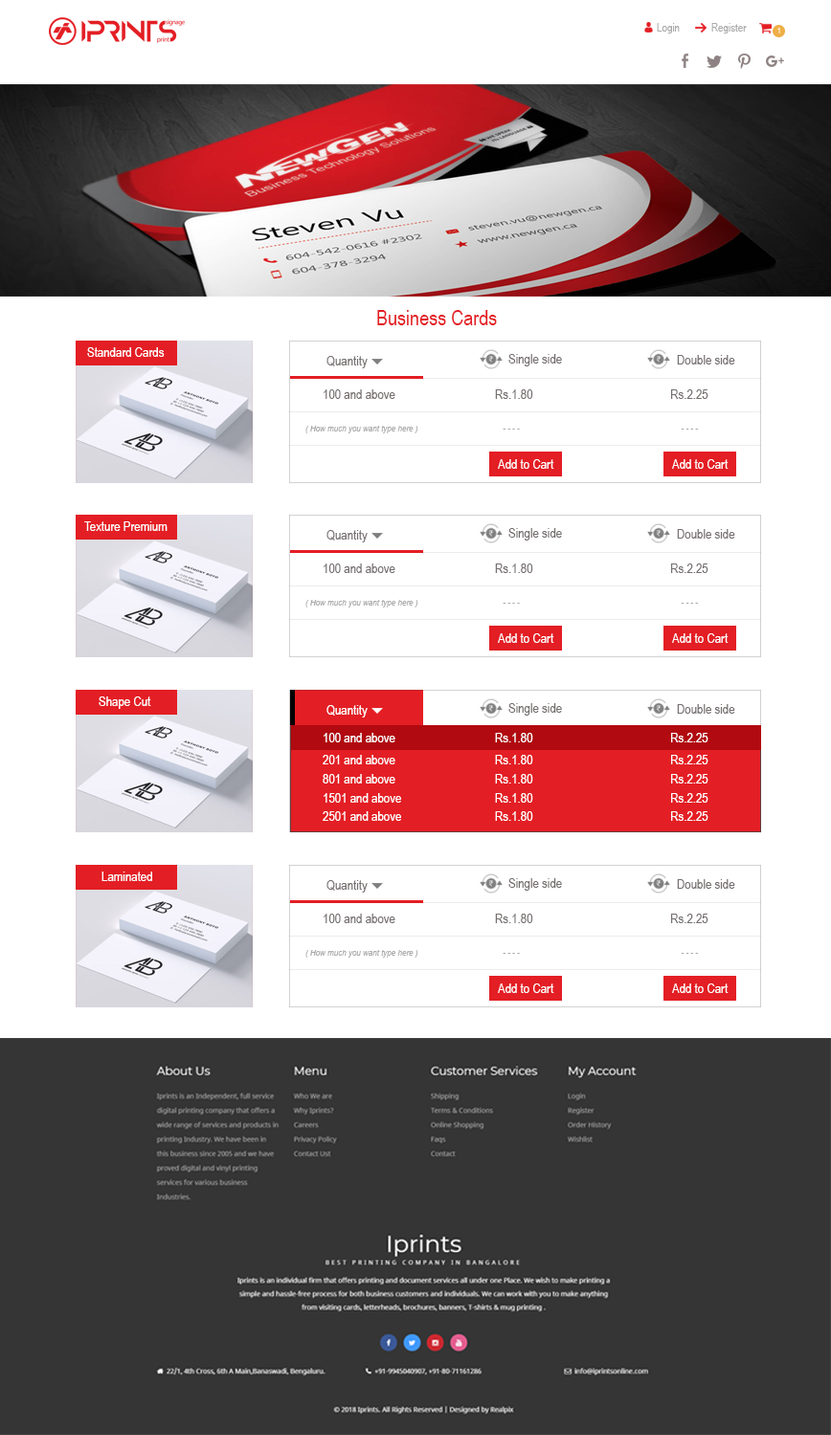
<style>
.page{position:relative;width:831px;height:1435px;background:#ffffff}
.page>*{position:absolute;margin:0}
.t1{font:11.5px "ArialNarrow";color:#ababab}
.t2{font:7.7px "ArialNarrow"}
.t3{font:21.1px "ArialNarrow";color:#e31e24}
.t4{font:13.4px "ArialNarrow";color:#ffffff}
.t5{font:13.4px "ArialNarrow";color:#756f6f}
.t6{font:7.7px "Arial-ItalicMT";color:#aba8a8}
</style>
<div class="page">
<p class="t1" style="left:657px;top:23px;width:89px;height:10px">Login            Register</p>
<p class="t2" style="left:777px;top:28px;width:3px;height:5px">1</p>
<p class="t3" style="left:377px;top:310px;width:120px;height:15px">Business Cards</p>
<p class="t4" style="left:87px;top:347px;width:78px;height:10px">Standard Cards</p>
<p class="t5" style="left:326px;top:356px;width:41px;height:12px">Quantity</p>
<p class="t5" style="left:508px;top:354px;width:54px;height:13px">Single side</p>
<p class="t5" style="left:677px;top:355px;width:58px;height:10px">Double side</p>
<p class="t5" style="left:323px;top:389px;width:385px;height:10px">100 and above    Rs.1.80     Rs.2.25</p>
<p class="t6" style="left:305px;top:426px;width:393px;height:8px">( How much you want type here )                                        - - - -                                                                            - - - -</p>
<p class="t4" style="left:498px;top:459px;width:56px;height:10px">Add to Cart</p>
<p class="t4" style="left:672px;top:459px;width:56px;height:10px">Add to Cart</p>
<p class="t4" style="left:84px;top:522px;width:83px;height:9px">Texture Premium</p>
<p class="t5" style="left:326px;top:530px;width:41px;height:13px">Quantity</p>
<p class="t5" style="left:508px;top:528px;width:54px;height:13px">Single side</p>
<p class="t5" style="left:677px;top:529px;width:58px;height:10px">Double side</p>
<p class="t5" style="left:323px;top:564px;width:385px;height:9px">100 and above    Rs.1.80     Rs.2.25</p>
<p class="t6" style="left:305px;top:600px;width:393px;height:8px">( How much you want type here )                                        - - - -                                                                            - - - -</p>
<p class="t4" style="left:498px;top:634px;width:56px;height:9px">Add to Cart</p>
<p class="t4" style="left:672px;top:634px;width:56px;height:9px">Add to Cart</p>
<p class="t4" style="left:99px;top:697px;width:52px;height:12px">Shape Cut</p>
<p class="t4" style="left:326px;top:705px;width:41px;height:13px">Quantity</p>
<p class="t5" style="left:508px;top:703px;width:54px;height:13px">Single side</p>
<p class="t5" style="left:677px;top:704px;width:58px;height:10px">Double side</p>
<p class="t4" style="left:323px;top:733px;width:385px;height:10px">100 and above    Rs.1.80     Rs.2.25</p>
<p class="t4" style="left:323px;top:755px;width:385px;height:10px">201 and above    Rs.1.80     Rs.2.25</p>
<p class="t4" style="left:323px;top:774px;width:385px;height:10px">801 and above    Rs.1.80     Rs.2.25</p>
<p class="t4" style="left:323px;top:793px;width:385px;height:10px">1501 and above    Rs.1.80     Rs.2.25</p>
<p class="t4" style="left:323px;top:812px;width:385px;height:9px">2501 and above    Rs.1.80     Rs.2.25</p>
<p class="t4" style="left:101px;top:872px;width:51px;height:9px">Laminated</p>
<p class="t5" style="left:326px;top:880px;width:41px;height:13px">Quantity</p>
<p class="t5" style="left:508px;top:879px;width:54px;height:12px">Single side</p>
<p class="t5" style="left:677px;top:879px;width:58px;height:10px">Double side</p>
<p class="t5" style="left:323px;top:914px;width:385px;height:10px">100 and above    Rs.1.80     Rs.2.25</p>
<p class="t6" style="left:305px;top:950px;width:393px;height:8px">( How much you want type here )                                        - - - -                                                                            - - - -</p>
<p class="t4" style="left:498px;top:984px;width:56px;height:9px">Add to Cart</p>
<p class="t4" style="left:672px;top:984px;width:56px;height:9px">Add to Cart</p>
</div>
